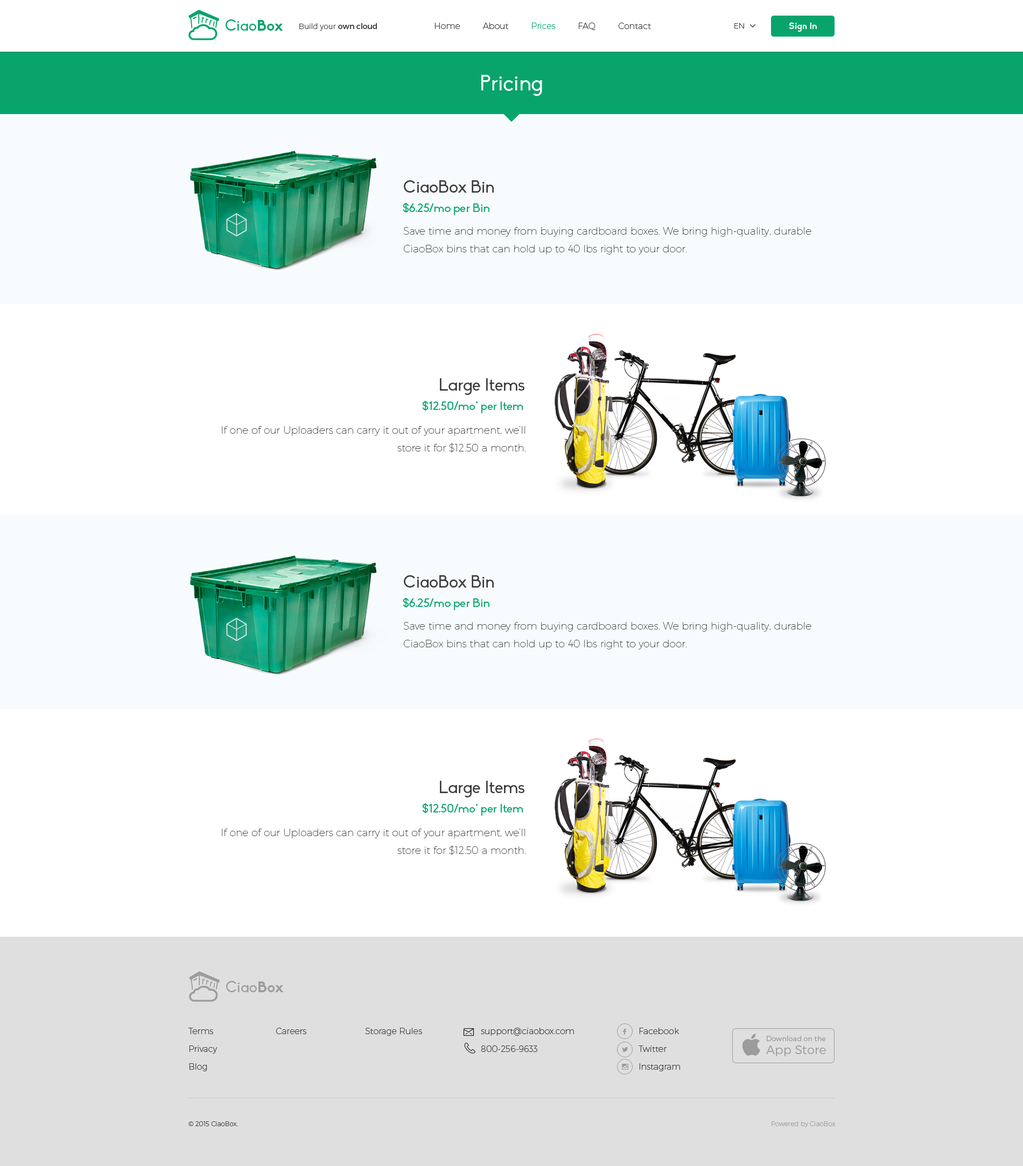
<style>
.page{position:relative;width:1023px;height:1166px;background:#ffffff}
.page>*{position:absolute;margin:0}
.t1{font:15.1px "Biko";color:#08a46c}
.t2{font:15.1px "Biko-Bold";color:#08a46c}
.t3{font:7.5px "Montserrat-UltraLight";color:#3d3d3d}
.t4{font:7.5px "Montserrat-Regular";color:#3d3d3d}
.t5{font:8.6px "Montserrat-UltraLight";color:#3d3d3d}
.t6{font:8.6px "Montserrat-UltraLight";color:#08a46c}
.t7{font:9.1px "Biko-Bold";color:#ffffff}
.t8{font:21.5px "Biko";color:#f8fbfd}
.t9{font:16.7px "Biko";color:#3d3d3d}
.t10{font:11.8px "Biko";color:#08a46c}
.t11{font:10.2px/17.8px "Montserrat-Hairline";color:#3d3d3d}
.t12{font:15.1px "Biko";color:#9c9c9c}
.t13{font:15.1px "Biko-Bold";color:#9c9c9c}
.t14{font:8.6px/17.8px "Montserrat-UltraLight";color:#3d3d3d}
.t15{font:10.2px "Socialico";color:#9c9c9c;text-transform:uppercase}
.t16{font:7px/17.8px "Montserrat-Light";color:#9c9c9c}
.t17{font:12.2px/12.9px "Montserrat-Light";color:#9c9c9c}
.t18{font:6.5px "font2985";color:#9c9c9c}
.t19{font:6.5px "Montserrat-UltraLight";color:#3d3d3d}
.t20{font:6.5px "Montserrat-UltraLight";color:#9c9c9c}
</style>
<div class="page">
<p class="t1" style="left:225px;top:19px;width:58px;height:12px">Ciao<span class="t2">Box</span></p>
<p class="t3" style="left:299px;top:23px;width:78px;height:8px">Build your <span class="t4">own cloud</span></p>
<p class="t5" style="left:434px;top:23px;width:217px;height:7px">Home         About         <span class="t6">Prices         </span>FAQ         Contact</p>
<p class="t3" style="left:734px;top:23px;width:10px;height:6px">EN</p>
<p class="t7" style="left:788px;top:22px;width:28px;height:10px">Sign In</p>
<p class="t8" style="left:481px;top:75px;width:61px;height:21px">Pricing</p>
<p class="t9" style="left:404px;top:180px;width:89px;height:13px">CiaoBox Bin</p>
<p class="t10" style="left:403px;top:203px;width:86px;height:12px">$6.25/mo per Bin</p>
<p class="t11" style="left:403px;top:227px;width:408px;height:28px">Save time and money from buying cardboard boxes. We bring high-quality, durable CiaoBox bins that can hold up to 40 lbs right to your door.</p>
<p class="t9" style="left:440px;top:378px;width:84px;height:17px">Large Items</p>
<p class="t10" style="left:422px;top:401px;width:101px;height:12px">$12.50/mo* per Item</p>
<p class="t11" style="left:222px;top:426px;width:304px;height:27px;text-align:right">If one of our Uploaders can carry it out of your apartment, we’ll store it for $12.50 a month.</p>
<p class="t9" style="left:404px;top:575px;width:89px;height:13px">CiaoBox Bin</p>
<p class="t10" style="left:403px;top:598px;width:86px;height:12px">$6.25/mo per Bin</p>
<p class="t11" style="left:403px;top:622px;width:408px;height:28px">Save time and money from buying cardboard boxes. We bring high-quality, durable CiaoBox bins that can hold up to 40 lbs right to your door.</p>
<p class="t9" style="left:440px;top:781px;width:84px;height:17px">Large Items</p>
<p class="t10" style="left:422px;top:803px;width:101px;height:13px">$12.50/mo* per Item</p>
<p class="t11" style="left:222px;top:829px;width:304px;height:27px;text-align:right">If one of our Uploaders can carry it out of your apartment, we’ll store it for $12.50 a month.</p>
<p class="t12" style="left:226px;top:981px;width:58px;height:11px">Ciao<span class="t13">Box</span></p>
<p class="t14" style="left:188px;top:1028px;width:29px;height:43px">Terms<br>Privacy<br>Blog</p>
<p class="t5" style="left:276px;top:1028px;width:30px;height:6px">Careers</p>
<p class="t5" style="left:365px;top:1028px;width:57px;height:8px">Storage Rules</p>
<p class="t14" style="left:481px;top:1028px;width:93px;height:24px">support@ciaobox.com<br>800-256-9633</p>
<p class="t15" style="left:622px;top:1028px;width:4px;height:7px">F</p>
<p class="t14" style="left:638px;top:1028px;width:42px;height:43px">Facebook<br>Twitter<br>Instagram</p>
<p class="t16" style="left:766px;top:1036px;width:60px;height:20px">Download on the<br><span class="t17">App Store</span></p>
<p class="t15" style="left:622px;top:1047px;width:6px;height:5px">L</p>
<p class="t18" style="left:622px;top:1064px;width:6px;height:6px">x</p>
<p class="t19" style="left:188px;top:1122px;width:50px;height:4px">© 2015 CiaoBox.</p>
<p class="t20" style="left:771px;top:1122px;width:64px;height:5px">Powered by CiaoBox</p>
</div>
